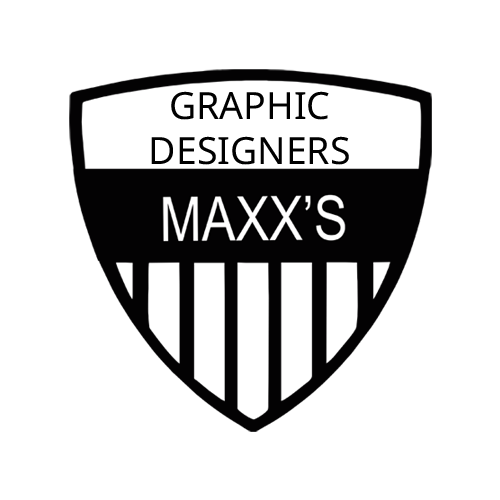
<style>
.page{position:relative;width:500px;height:500px;background:#ffffff}
.page>*{position:absolute;margin:0}
.t1{font:37.5px "NotoSans-Regular";color:#000000}
</style>
<div class="page">
<p class="t1" style="left:151px;top:91px;width:198px;height:74px;text-align:center">GRAPHIC<br>DESIGNERS</p>
</div>
